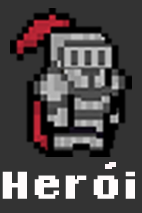
<style>
.page{position:relative;width:142px;height:213px;background:#333333}
.page>*{position:absolute;margin:0}
.t1{font:60px "8-Bit-Madness";color:#fffcfc;font-weight:bold}
</style>
<div class="page">
<p class="t1" style="left:2px;top:171px;width:133px;height:28px">Heroi</p>
</div>
